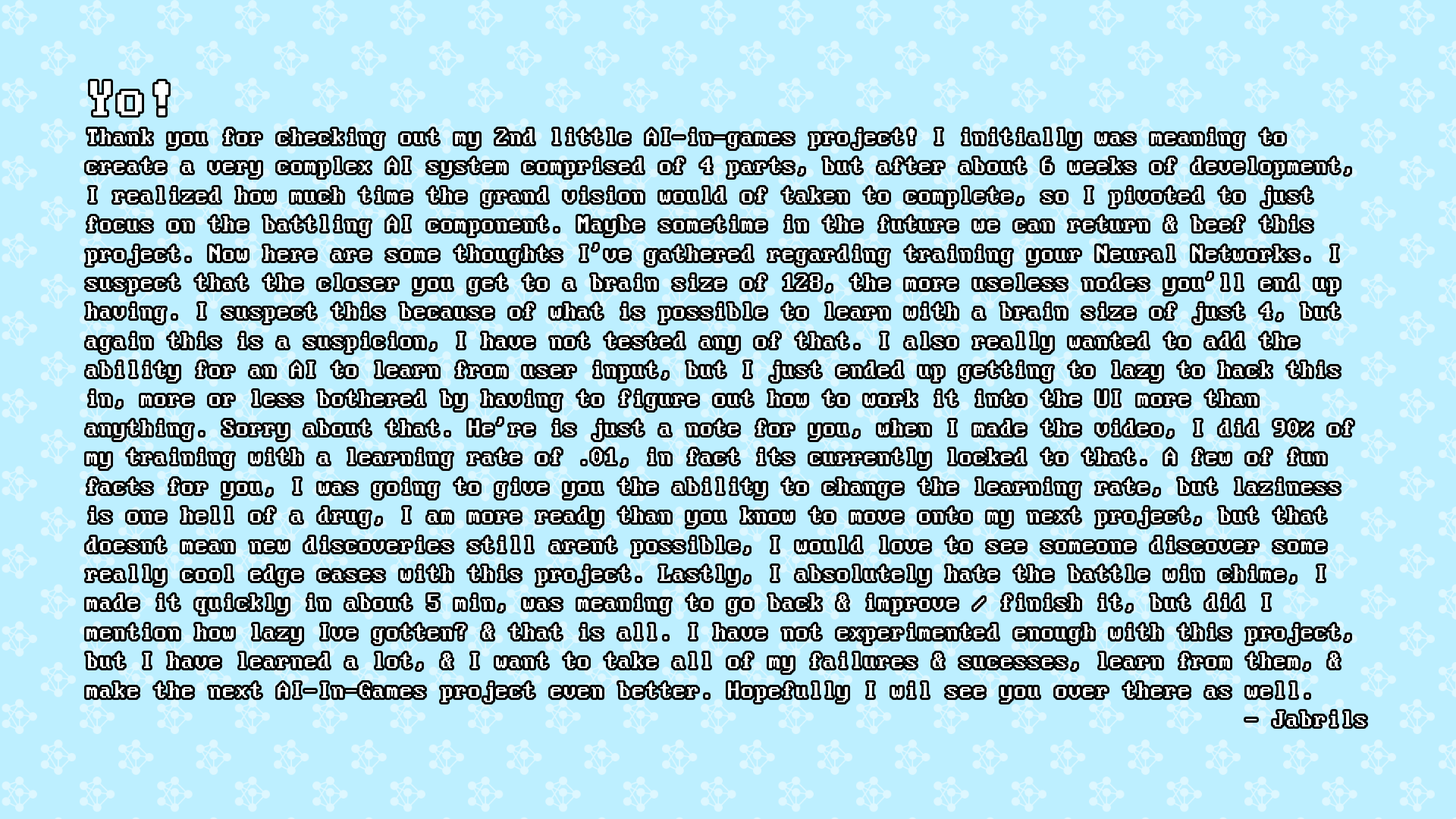
<style>
.page{position:relative;width:1456px;height:819px;background:#bdefff}
.page>*{position:absolute;margin:0}
.t1{font:24.3px "PerfectDOSVGA437";color:#ffffff}
.t2{font:54.6px "PerfectDOSVGA437";color:#ffffff}
</style>
<div class="page">
<p class="t1" style="left:86px;top:81px;width:1280px;height:645px"><span class="t2">Yo!<br></span>Thank you for checking out my 2nd little AI-in-games project! I initially was meaning to create a very complex AI system comprised of 4 parts, but after about 6 weeks of development, I realized how much time the grand vision would of taken to complete, so I pivoted to just focus on the battling AI component. Maybe sometime in the future we can return &amp; beef this project. Now here are some thoughts I've gathered regarding training your Neural Networks. I suspect that the closer you get to a brain size of 128, the more useless nodes you'll end up having. I suspect this because of what is possible to learn with a brain size of just 4, but again this is a suspicion, I have not tested any of that. I also really wanted to add the ability for an AI to learn from user input, but I just ended up getting to lazy to hack this in, more or less bothered by having to figure out how to work it into the UI more than anything. Sorry about that. He're is just a note for you, when I made the video, I did 90% of my training with a learning rate of .01, in fact its currently locked to that. A few of fun facts for you, I was going to give you the ability to change the learning rate, but laziness is one hell of a drug, I am more ready than you know to move onto my next project, but that doesnt mean new discoveries still arent possible, I would love to see someone discover some really cool edge cases with this project. Lastly, I absolutely hate the battle win chime, I made it quickly in about 5 min, was meaning to go back &amp; improve / finish it, but did I mention how lazy Ive gotten? &amp; that is all. I have not experimented enough with this project, but I have learned a lot, &amp; I want to take all of my failures &amp; sucesses, learn from them, &amp; make the next AI-In-Games project even better. Hopefully I wil see you over there as well.<br>- Jabrils</p>
</div>
